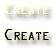
<style>
.page{position:relative;width:56px;height:48px;background:#ffffff}
.page>*{position:absolute;margin:0}
.t1{font:17px "OCRAExtended";color:#ffffff;font-variant:small-caps}
.t2{font:17px "OCRAExtended";color:#000000;font-variant:small-caps}
</style>
<div class="page">
<p class="t1" style="left:4px;top:3px;width:45px;height:11px">Create</p>
<p class="t2" style="left:4px;top:29px;width:45px;height:11px">Create</p>
</div>
